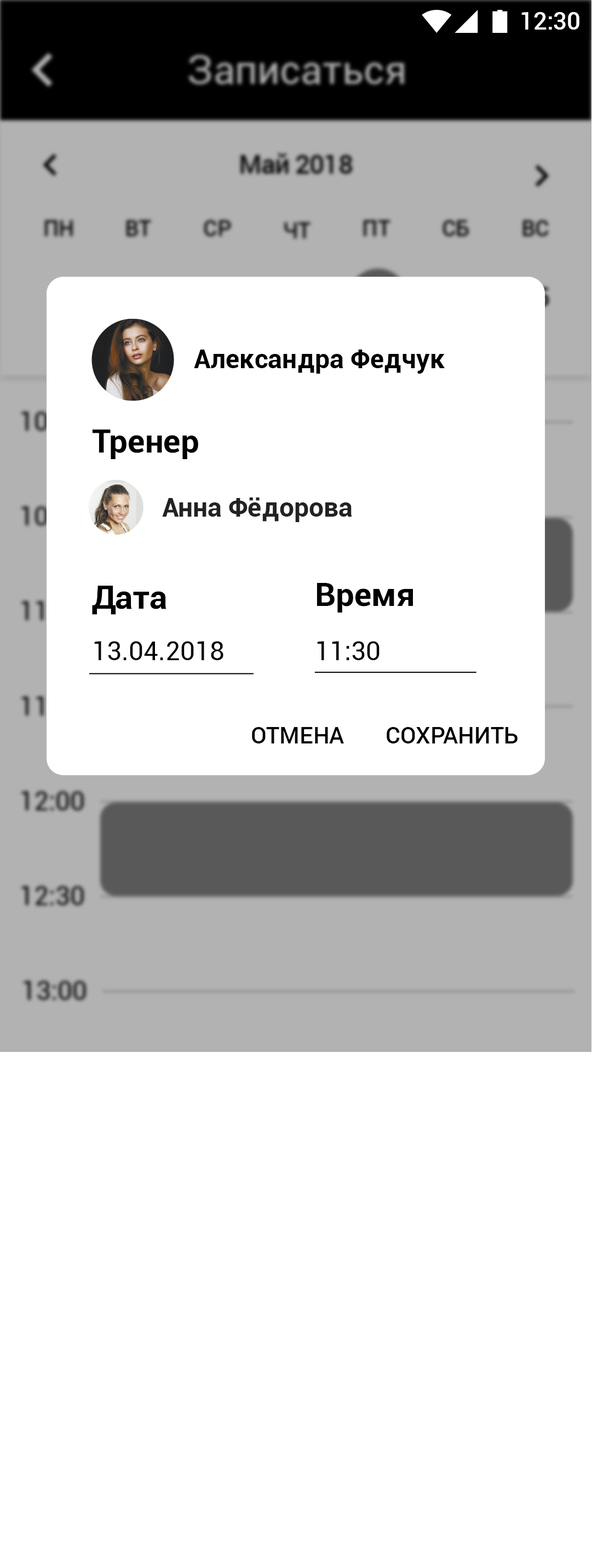
<style>
.page{position:relative;width:592px;height:1568px;background:#ffffff}
.page>*{position:absolute;margin:0}
.t1{font:24.1px "Roboto-Medium";color:#ffffff}
.t2{font:26.3px "Roboto-Bold";color:#000000}
.t3{font:32.9px "Roboto-Bold";color:#000000}
.t4{font:26.3px "Roboto-Bold";color:#222220}
.t5{font:26.3px "Roboto-Regular";color:#000000}
.t6{font:23px "Roboto-Medium";color:#000000}
</style>
<div class="page">
<p class="t1" style="left:522px;top:12px;width:58px;height:18px">12:30</p>
<p class="t2" style="left:194px;top:350px;width:251px;height:24px">Александра Федчук</p>
<p class="t3" style="left:92px;top:430px;width:106px;height:29px">Тренер</p>
<p class="t4" style="left:162px;top:497px;width:190px;height:25px">Анна Фёдорова</p>
<p class="t3" style="left:92px;top:586px;width:75px;height:29px">Дата</p>
<p class="t3" style="left:317px;top:583px;width:96px;height:30px">Время</p>
<p class="t5" style="left:94px;top:641px;width:130px;height:19px">13.04.2018</p>
<p class="t5" style="left:317px;top:641px;width:63px;height:19px">11:30</p>
<p class="t6" style="left:252px;top:727px;width:92px;height:16px">ОТМЕНА</p>
<p class="t6" style="left:387px;top:727px;width:131px;height:16px">СОХРАНИТЬ</p>
</div>
